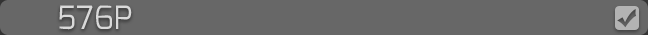
<style>
.page{position:relative;width:648px;height:35px;background:#676767}
.page>*{position:absolute;margin:0}
.t1{font:32px "Exo-Regular";color:#d9d9d9;text-transform:uppercase}
</style>
<div class="page">
<p class="t1" style="left:59px;top:5px;width:73px;height:25px">576p</p>
</div>
